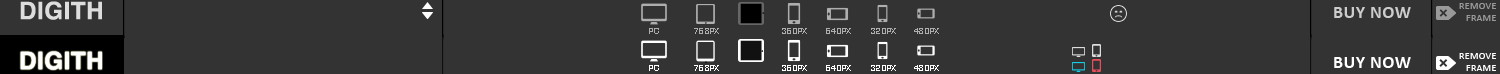
<style>
.page{position:relative;width:1500px;height:74px;background:#333333}
.page>*{position:absolute;margin:0}
.t1{font:24px "Helvetica_cyr-Bold";letter-spacing:0.025em;color:#dddddd;text-transform:uppercase}
.t2{font:10px "Calibri";letter-spacing:0.025em;color:#999999;text-transform:uppercase}
.t3{font:18px "Calibri-Bold";letter-spacing:0.025em;color:#cccccc;text-transform:uppercase}
.t4{font:8px "Square721BT-Roman";letter-spacing:0.05em;color:#aeaeae}
.t5{font:24px "Helvetica_cyr-Bold";letter-spacing:0.025em;color:#ffffff;text-transform:uppercase}
.t6{font:10px "Calibri";letter-spacing:0.025em;color:#ffffff;text-transform:uppercase}
.t7{font:8px "Square721BT-Roman";letter-spacing:0.05em;color:#ffffff}
.t8{font:18px "Calibri-Bold";letter-spacing:0.025em;color:#ffffff;text-transform:uppercase}
</style>
<div class="page">
<p class="t1" style="left:20px;top:1px;width:82px;height:19px">DIGITH</p>
<p class="t2" style="left:1459px;top:3px;width:37px;height:18px;text-align:right">Remove<br>frame</p>
<p class="t3" style="left:1334px;top:7px;width:77px;height:11px">buy now</p>
<p class="t4" style="left:649px;top:28px;width:10px;height:6px">PC</p>
<p class="t4" style="left:694px;top:28px;width:25px;height:6px">768PX</p>
<p class="t4" style="left:782px;top:28px;width:25px;height:6px">360PX</p>
<p class="t4" style="left:826px;top:28px;width:25px;height:6px">640PX</p>
<p class="t4" style="left:871px;top:28px;width:25px;height:6px">320PX</p>
<p class="t4" style="left:914px;top:28px;width:25px;height:6px">480PX</p>
<p class="t5" style="left:20px;top:51px;width:82px;height:19px">DIGITH</p>
<p class="t6" style="left:1459px;top:53px;width:37px;height:18px;text-align:right">Remove<br>frame</p>
<p class="t7" style="left:649px;top:65px;width:10px;height:6px">PC</p>
<p class="t7" style="left:694px;top:65px;width:25px;height:6px">768PX</p>
<p class="t7" style="left:782px;top:65px;width:25px;height:6px">360PX</p>
<p class="t7" style="left:826px;top:65px;width:25px;height:6px">640PX</p>
<p class="t7" style="left:871px;top:65px;width:25px;height:6px">320PX</p>
<p class="t7" style="left:914px;top:65px;width:25px;height:6px">480PX</p>
<p class="t8" style="left:1334px;top:57px;width:77px;height:11px">buy now</p>
</div>
